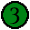
<style>
.page{position:relative;width:30px;height:30px;background:#008215}
.page>*{position:absolute;margin:0}
.t1{font:22px "Cinzel-Regular";letter-spacing:0.04em;color:#000000;font-weight:bold}
</style>
<div class="page">
<p class="t1" style="left:10px;top:7px;width:10px;height:17px">3</p>
</div>
